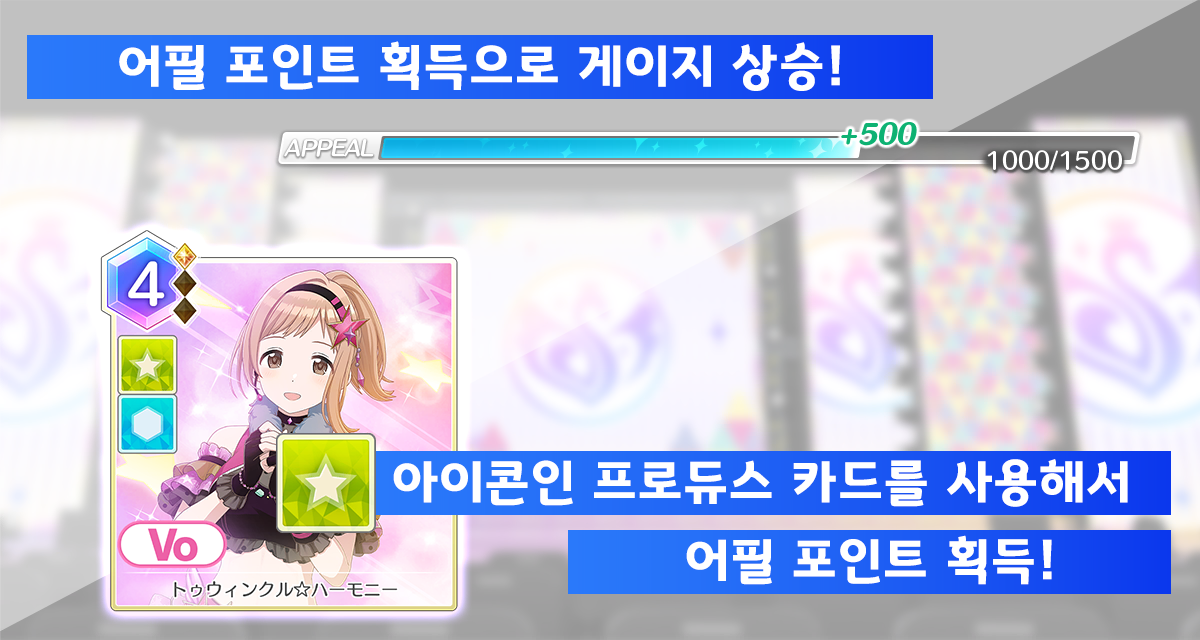
<style>
.page{position:relative;width:1200px;height:640px}
.page>*{position:absolute;margin:0}
.t1{font:50.7px "GyeonggiTitleB";letter-spacing:0.05em;color:#ffffff}
</style>
<div class="page">
<p class="t1" style="left:119px;top:41px;width:721px;height:50px">어필 포인트 획득으로 게이지 상승!</p>
<p class="t1" style="left:393px;top:459px;width:735px;height:48px">아이콘인 프로듀스 카드를 사용해서</p>
<p class="t1" style="left:686px;top:535px;width:366px;height:50px">어필 포인트 획득!</p>
</div>
